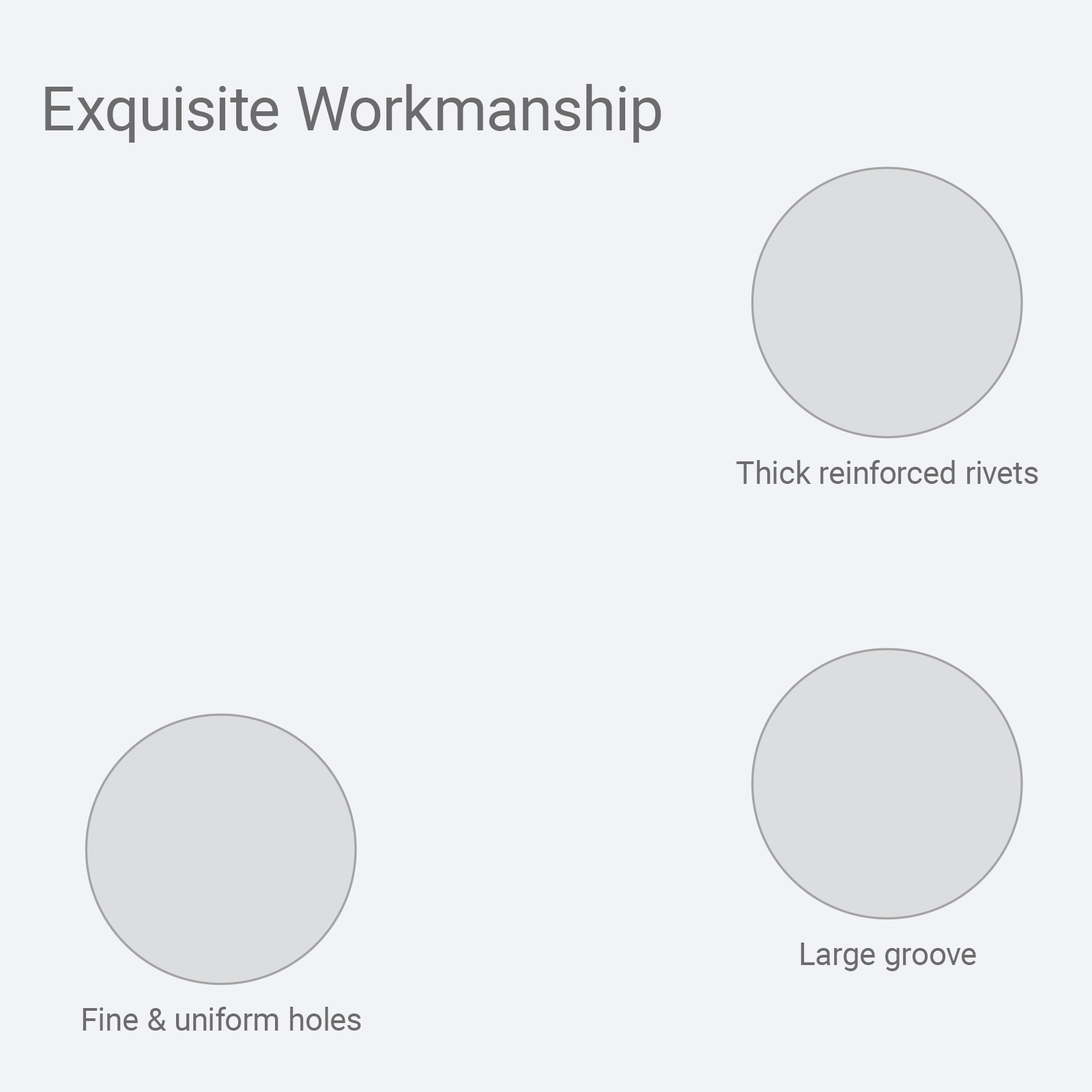
<style>
.page{position:relative;width:1092px;height:1092px;background:#f2f3f6}
.page>*{position:absolute;margin:0}
.t1{font:61.5px "Roboto-Regular";color:#6c6c6c}
.t2{font:31.6px "Roboto-Regular";color:#6c6c6c}
</style>
<div class="page">
<p class="t1" style="left:45px;top:84px;width:616px;height:59px">Exquisite Workmanship</p>
<p class="t2" style="left:736px;top:460px;width:302px;height:24px">Thick reinforced rivets</p>
<p class="t2" style="left:801px;top:943px;width:175px;height:28px">Large groove</p>
<p class="t2" style="left:83px;top:1007px;width:278px;height:24px">Fine &amp; uniform holes</p>
</div>
